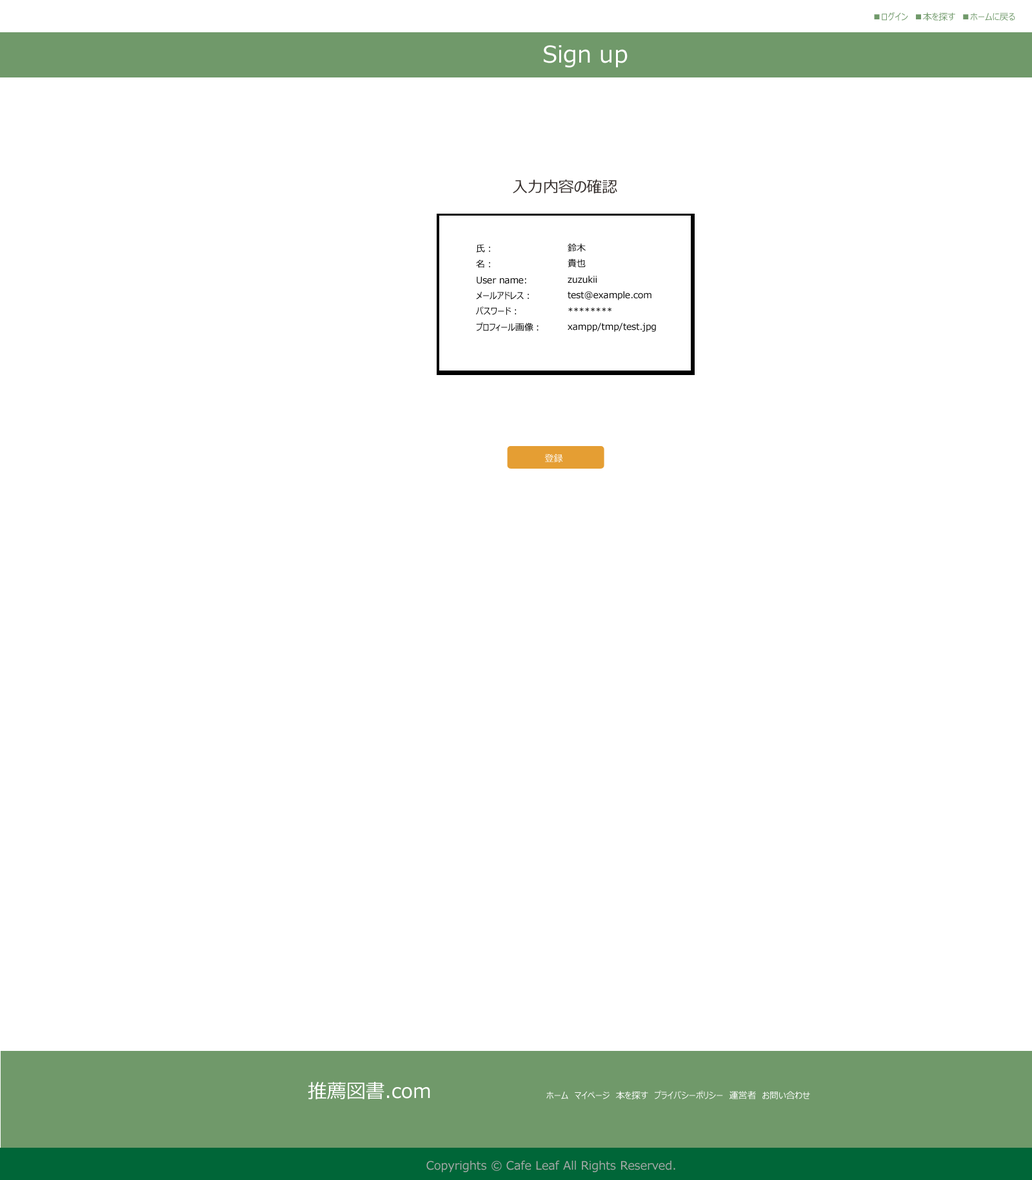
<style>
.page{position:relative;width:1032px;height:1180px;background:#ffffff}
.page>*{position:absolute;margin:0}
.t1{font:9px "MeiryoUI";color:#70996a}
.t2{font:23.1px "MeiryoUI";color:#ffffff}
.t3{font:15.4px "MeiryoUI";color:#362f2d}
.t4{font:9px "MeiryoUI";color:#050505}
.t5{font:9px "MeiryoUI";color:#ffffff}
.t6{font:19.3px "MeiryoUI";color:#ffffff}
.t7{font:11.6px "MeiryoUI";color:#aaaaaa}
</style>
<div class="page">
<p class="t1" style="left:874px;top:12px;width:142px;height:9px">■ログイン　■本を探す　■ホームに戻る</p>
<p class="t2" style="left:544px;top:45px;width:84px;height:23px">Sign up</p>
<p class="t3" style="left:513px;top:179px;width:105px;height:15px">入力内容の確認</p>
<p class="t4" style="left:476px;top:244px;width:63px;height:87px">氏：<br>名：<br>User name:<br>メールアドレス：<br>パスワード：<br>プロフィール画像：</p>
<p class="t4" style="left:568px;top:243px;width:88px;height:89px">鈴木<br>貴也<br>zuzukii<br>test@example.com<br>********<br>xampp/tmp/test.jpg</p>
<p class="t5" style="left:545px;top:454px;width:18px;height:8px">登録</p>
<p class="t6" style="left:308px;top:1081px;width:122px;height:18px">推薦図書.com</p>
<p class="t5" style="left:547px;top:1090px;width:263px;height:9px">ホーム　マイページ　本を探す　プライバシーポリシー　運営者　お問い合わせ</p>
<p class="t7" style="left:427px;top:1160px;width:249px;height:12px">Copyrights © Cafe Leaf All Rights Reserved.</p>
</div>
